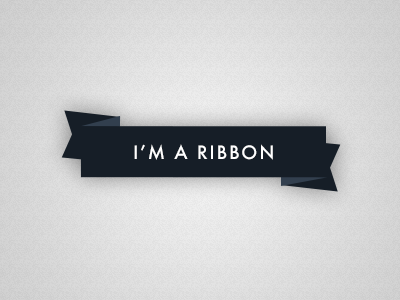
<style>
.page{position:relative;width:400px;height:300px}
.page>*{position:absolute;margin:0}
.t1{font:18px "Futura-Medium";letter-spacing:0.1em;color:#ffffff;text-transform:uppercase}
</style>
<div class="page">
<p class="t1" style="left:134px;top:144px;width:139px;height:16px">I’m a ribbon</p>
</div>
